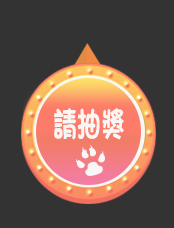
<style>
.page{position:relative;width:174px;height:228px;background:#333333}
.page>*{position:absolute;margin:0}
.t1{font:33.6px "DFFangYuan-W7-WIN-BF";color:#f9f7f6;scale:0.71 1}
</style>
<div class="page">
<p class="t1" style="left:54px;top:108px;width:70px;height:32px">請抽獎</p>
</div>
